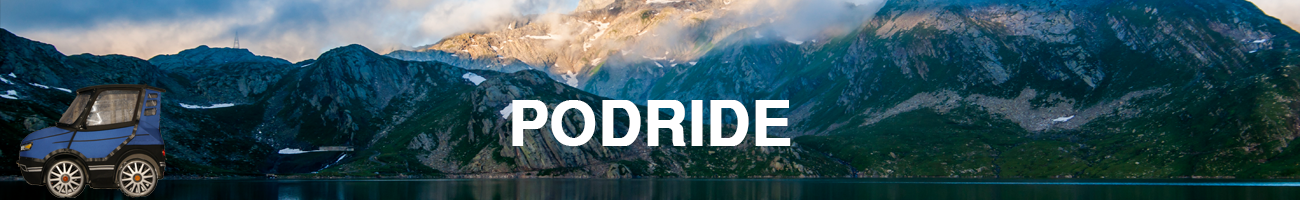
<style>
.page{position:relative;width:1300px;height:200px}
.page>*{position:absolute;margin:0}
.t1{font:60px "SansSerifBold";color:#ffffff;text-transform:uppercase;font-weight:bold}
</style>
<div class="page">
<p class="t1" style="left:512px;top:100px;width:279px;height:46px">Podride</p>
</div>
